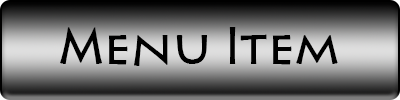
<style>
.page{position:relative;width:400px;height:100px}
.page>*{position:absolute;margin:0}
.t1{font:48px "Pericles";color:#000000}
</style>
<div class="page">
<p class="t1" style="left:60px;top:27px;width:278px;height:39px">Menu Item</p>
</div>
